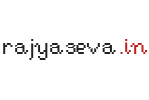
<style>
.page{position:relative;width:149px;height:100px;background:#ffffff}
.page>*{position:absolute;margin:0}
.t1{font:28.6px "RSEHandwritingPi";letter-spacing:-0.01em;color:#222222}
.t2{font:28.6px "RSEHandwritingPi";letter-spacing:-0.01em;color:#bc2020}
</style>
<div class="page">
<p class="t1" style="left:3px;top:39px;width:145px;height:21px">rajyaseva<span class="t2">.in</span></p>
</div>
